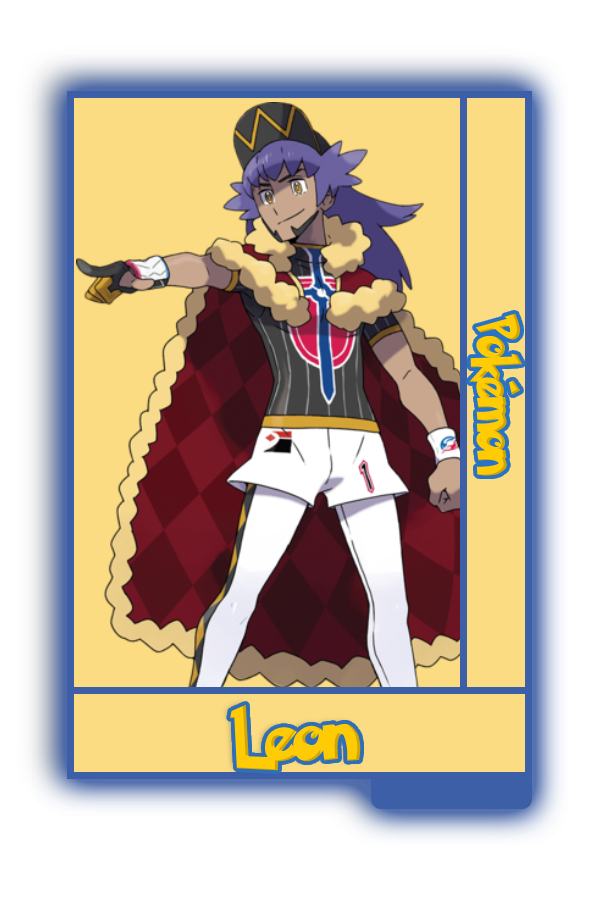
<style>
.page{position:relative;width:600px;height:900px;background:#fbdc83}
.page>*{position:absolute;margin:0}
.t1{font:48.8px "PokemonSolidNormal";color:#ffcb05;scale:0.8 1}
.t2{font:60.1px "PokemonSolidNormal";color:#ffcb05;scale:0.96 1}
</style>
<div class="page">
<p class="t1" style="left:469px;top:313px;width:54px;height:163px;rotate:90deg">Pokémon</p>
<p class="t2" style="left:230px;top:704px;width:131px;height:67px">Leon</p>
</div>
